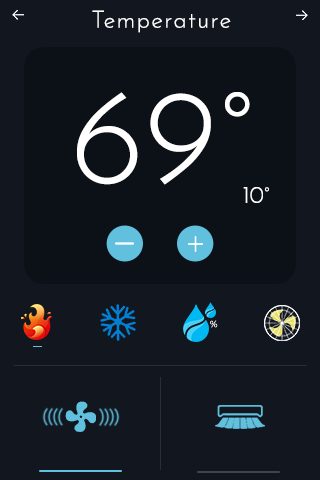
<style>
.page{position:relative;width:320px;height:480px;background:#11161f}
.page>*{position:absolute;margin:0}
.t1{font:24px "JosefinSans-Light";letter-spacing:0.05em;color:#ffffff}
.t2{font:140px "JosefinSans-Light";color:#ffffff}
.t3{font:23.9px "JosefinSans-Light";color:#ffffff;scale:0.95 1}
</style>
<div class="page">
<p class="t1" style="left:92px;top:10px;width:139px;height:23px">Temperature</p>
<p class="t2" style="left:77px;top:92px;width:173px;height:93px">69°</p>
<p class="t3" style="left:243px;top:187px;width:26px;height:16px">10°</p>
</div>
